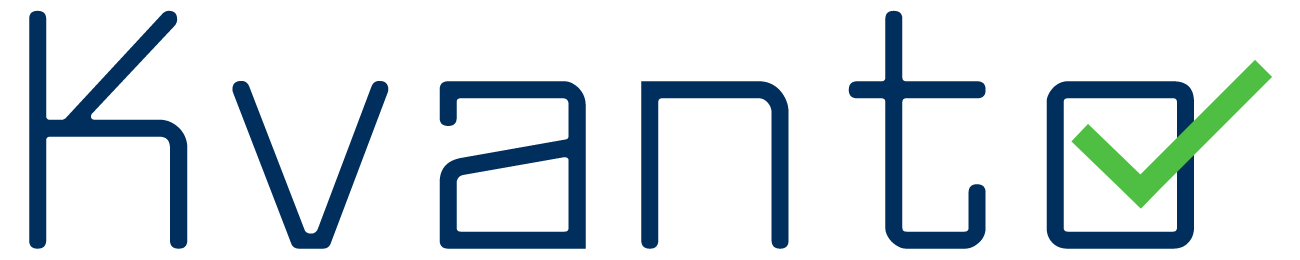
<style>
.page{position:relative;width:1300px;height:260px;background:#ffffff}
.page>*{position:absolute;margin:0}
.t1{font:328.9px "LarabiefontRg-Regular";color:#002f5d}
</style>
<div class="page">
<p class="t1" style="left:29px;top:10px;width:957px;height:239px">Kvant</p>
<p class="t1" style="left:1046px;top:81px;width:148px;height:168px">o</p>
</div>
